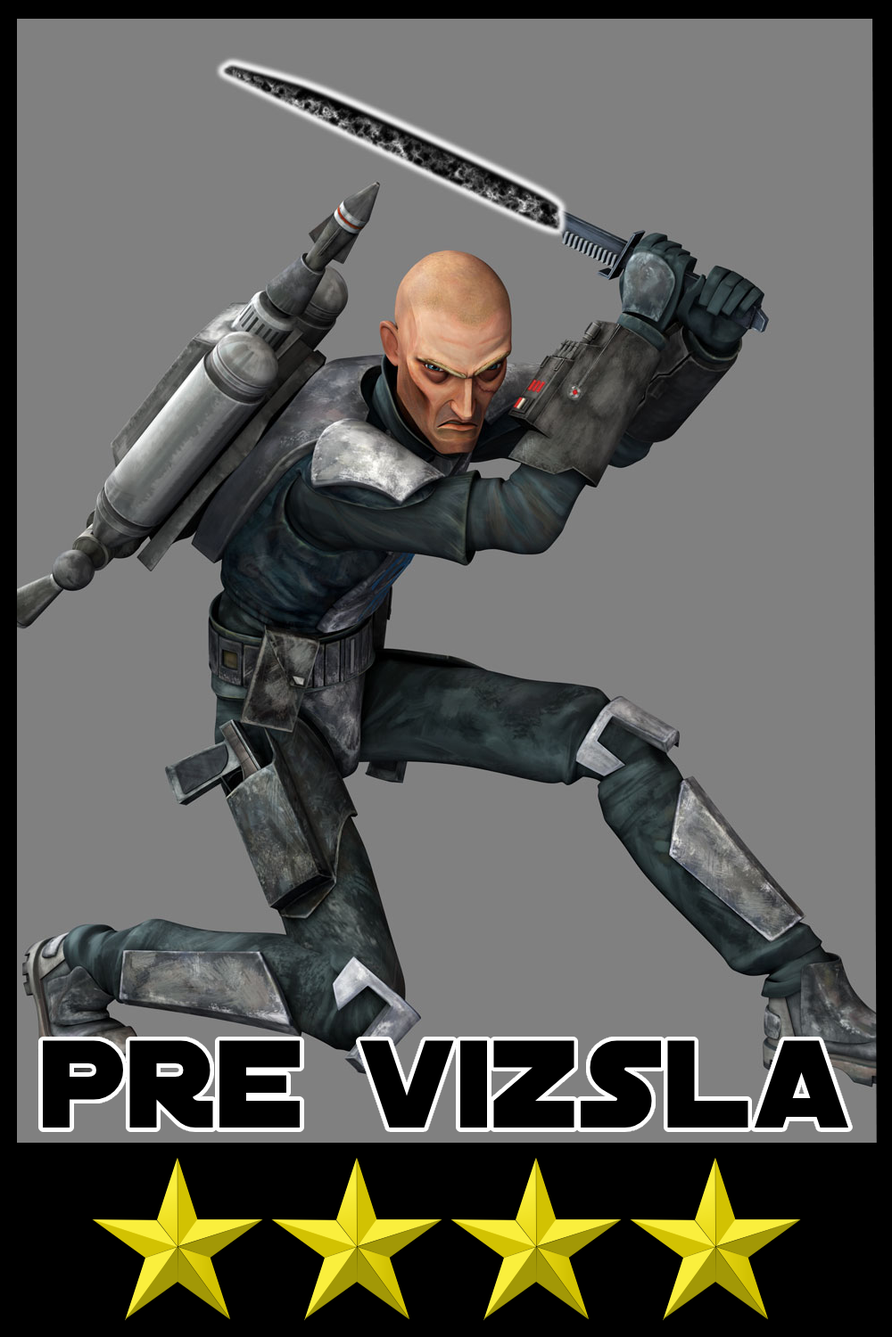
<style>
.page{position:relative;width:892px;height:1337px;background:#808080}
.page>*{position:absolute;margin:0}
.t1{font:133.7px "DistantGalaxy";color:#000000}
</style>
<div class="page">
<p class="t1" style="left:43px;top:1041px;width:805px;height:87px">pre vizsla</p>
</div>
